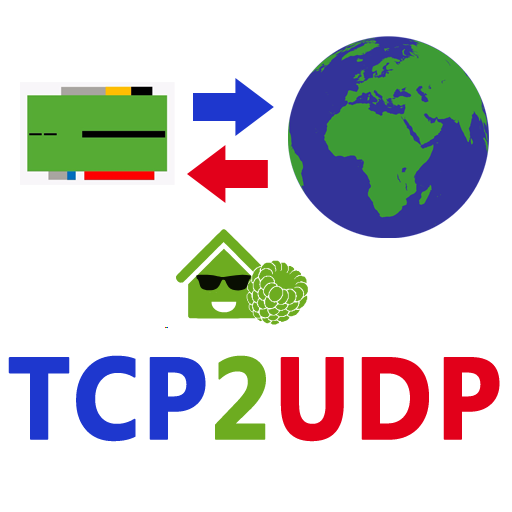
<style>
.page{position:relative;width:512px;height:512px;background:#ffffff}
.page>*{position:absolute;margin:0}
.t1{font:115.7px "MicrosoftPhagsPa-Bold";color:#1e37ce;font-weight:bold;scale:0.92 1}
.t2{font:115.7px "MicrosoftPhagsPa-Bold";color:#6dac20;font-weight:bold;scale:0.92 1}
.t3{font:115.7px "MicrosoftPhagsPa-Bold";color:#e2001a;font-weight:bold;scale:0.92 1}
</style>
<div class="page">
<p class="t1" style="left:8px;top:355px;width:492px;height:87px">TCP<span class="t2">2</span><span class="t3">UDP</span></p>
</div>
